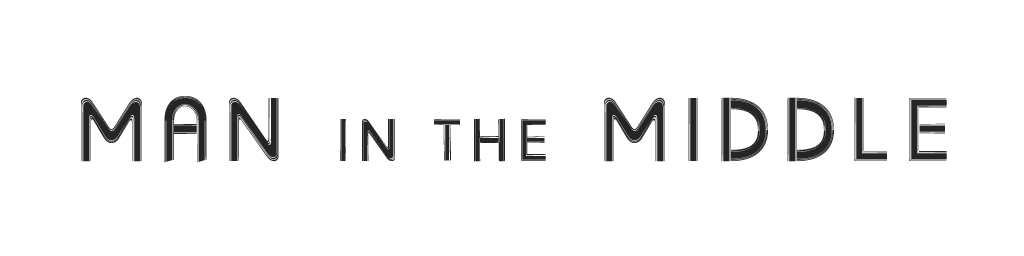
<style>
.page{position:relative;width:1024px;height:256px;background:#ffffff}
.page>*{position:absolute;margin:0}
.t1{font:60px "Sunscreen-Pentaline";letter-spacing:0.1em;color:#252525}
.t2{font:90px "Sunscreen-Pentaline";letter-spacing:0.1em;color:#252525}
</style>
<div class="page">
<p class="t1" style="left:81px;top:96px;width:866px;height:67px"><span class="t2">Man </span>in the<span class="t2"> Middle</span></p>
</div>
